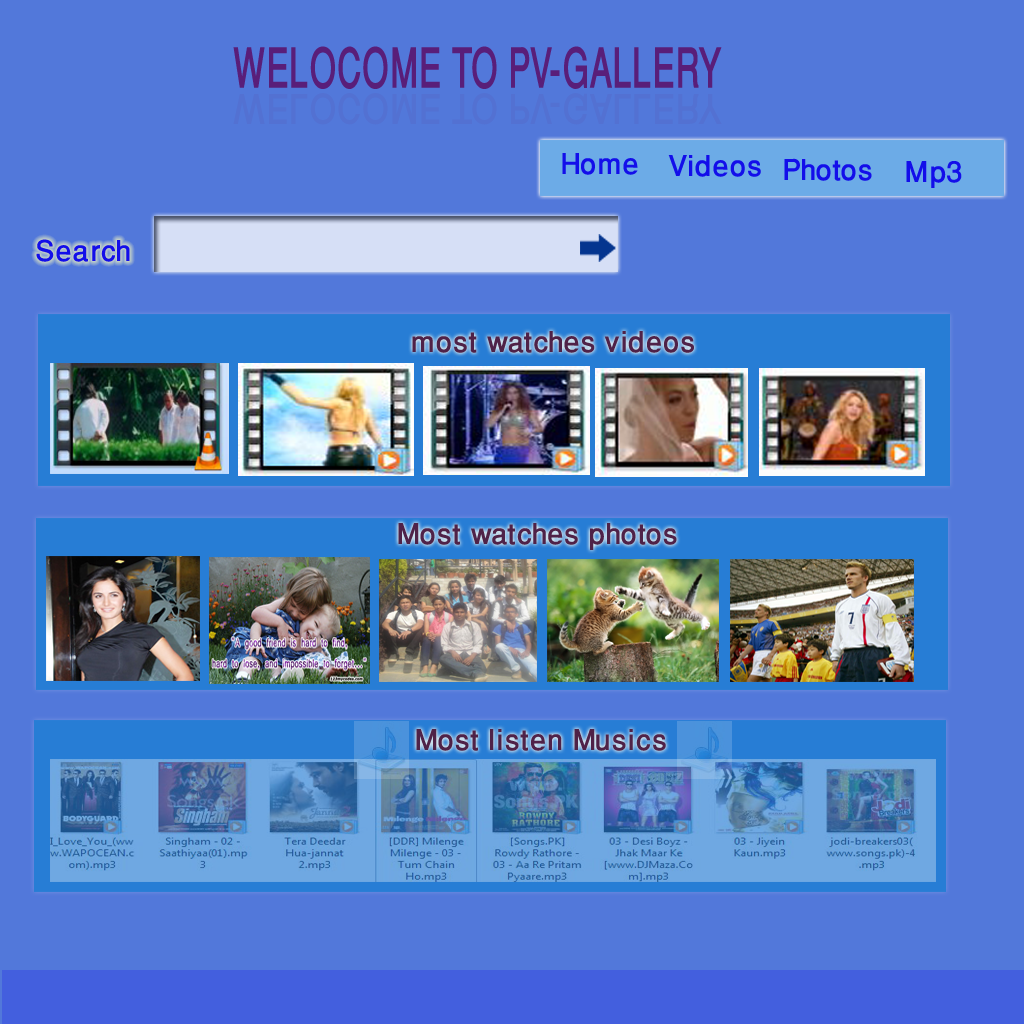
<style>
.page{position:relative;width:1024px;height:1024px;background:#5278da}
.page>*{position:absolute;margin:0}
.t1{font:78.8px "WinSoftPro-Medium";color:#591e79;scale:0.62 1}
.t2{font:58.1px "WinSoftPro-Medium";color:#5371d2;scale:0.83 1}
.t3{font:41px "WinSoftPro-Medium";color:#130eea}
.t4{font:41px "WinSoftPro-Medium";color:#4f2248}
</style>
<div class="page">
<p class="t1" style="left:233px;top:46px;width:489px;height:43px">WELOCOME TO PV-GALLERY</p>
<p class="t2" style="left:233px;top:93px;width:489px;height:32px">WELOCOME TO PV-GALLERY</p>
<p class="t3" style="left:562px;top:153px;width:76px;height:22px">Home</p>
<p class="t3" style="left:668px;top:155px;width:93px;height:22px">Videos</p>
<p class="t3" style="left:784px;top:158px;width:88px;height:23px">Photos</p>
<p class="t3" style="left:906px;top:161px;width:56px;height:27px">Mp3</p>
<p class="t3" style="left:36px;top:239px;width:94px;height:23px">Search</p>
<p class="t4" style="left:412px;top:331px;width:282px;height:22px">most watches videos</p>
<p class="t4" style="left:398px;top:523px;width:279px;height:27px">Most watches photos</p>
<p class="t4" style="left:416px;top:729px;width:250px;height:22px">Most listen Musics</p>
</div>
